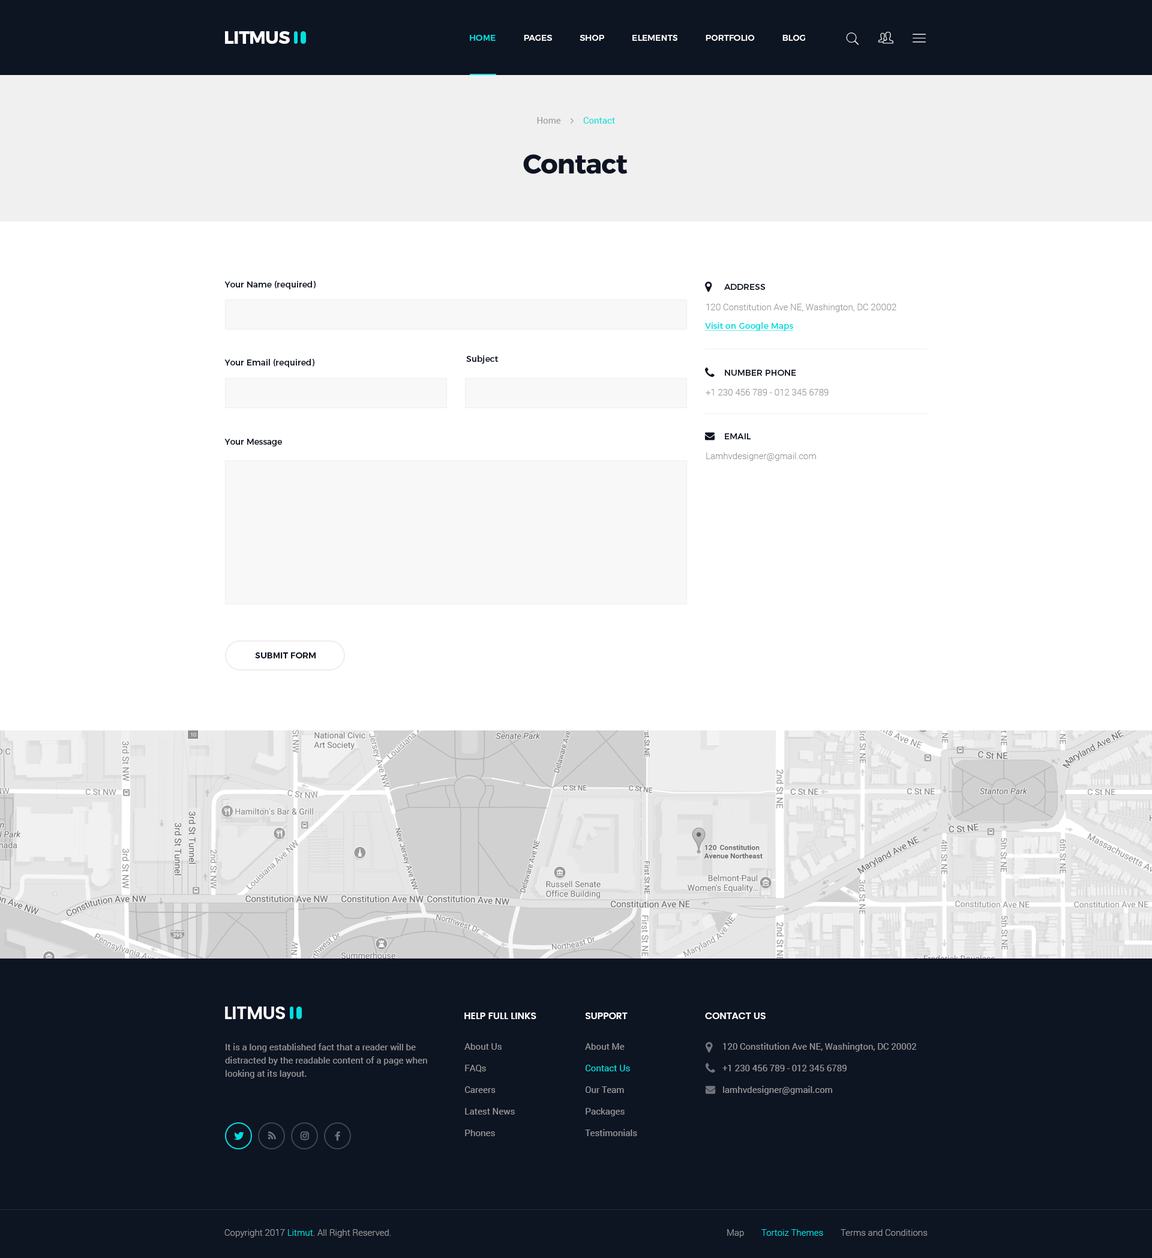
<style>
.page{position:relative;width:1152px;height:1258px;background:#ffffff}
.page>*{position:absolute;margin:0}
.t1{font:18px "Montserrat-Bold";letter-spacing:-0.025em;color:#ffffff;text-transform:uppercase}
.t2{font:8.4px "Montserrat-Medium";color:#ffffff;text-transform:uppercase}
.t3{font:8.4px "Montserrat-Medium";color:#03dedf;text-transform:uppercase}
.t4{font:9px "Roboto-Regular";color:#03dedf}
.t5{font:9px "Roboto-Regular";color:#999999}
.t6{font:27px "Montserrat-Bold";letter-spacing:-0.025em;color:#0d1422}
.t7{font:8.4px "Montserrat-Regular";color:#0d1422}
.t8{font:8.4px "Montserrat-Regular";color:#0d1422;text-transform:uppercase}
.t9{font:9px "Roboto-Light";color:#999999}
.t10{font:8.4px "Montserrat-Regular";color:#03dedf;text-decoration:underline}
.t11{font:8.4px "Montserrat-SemiBold";color:#0d1422;text-transform:uppercase}
.t12{font:18px "Poppins-SemiBold";letter-spacing:-0.025em;color:#ffffff;text-transform:uppercase}
.t13{font:9.6px "Poppins-SemiBold";letter-spacing:-0.025em;color:#ffffff;text-transform:uppercase}
.t14{font:9px/13.2px "Roboto-Regular";color:#999999}
.t15{font:9px/21.6px "Roboto-Regular";color:#999999}
.t16{font:9px/21.6px "Roboto-Regular";color:#03dedf}
.t17{font:9px "Roboto-Light";color:#03dedf}
</style>
<div class="page">
<p class="t1" style="left:225px;top:31px;width:65px;height:13px">Litmus</p>
<p class="t2" style="left:470px;top:35px;width:335px;height:6px"><span class="t3">HOME</span>           PAGES           SHOP           ELEMENTS           PORTFOLIO           BLOG</p>
<p class="t4" style="left:537px;top:117px;width:78px;height:7px"><span class="t5">Home          </span>Contact</p>
<p class="t6" style="left:523px;top:154px;width:105px;height:20px">Contact</p>
<p class="t7" style="left:224px;top:281px;width:92px;height:8px">Your Name (required)</p>
<p class="t8" style="left:724px;top:284px;width:42px;height:6px">Address</p>
<p class="t9" style="left:706px;top:304px;width:190px;height:8px">120 Constitution Ave NE, Washington, DC 20002</p>
<p class="t10" style="left:705px;top:322px;width:89px;height:9px">Visit on Google Maps</p>
<p class="t7" style="left:224px;top:359px;width:90px;height:8px">Your Email (required)</p>
<p class="t7" style="left:466px;top:355px;width:33px;height:9px">Subject</p>
<p class="t8" style="left:725px;top:370px;width:71px;height:6px">Number Phone</p>
<p class="t9" style="left:706px;top:389px;width:123px;height:6px">+1 230 456 789 - 012 345 6789</p>
<p class="t8" style="left:725px;top:433px;width:26px;height:6px">Email</p>
<p class="t7" style="left:224px;top:439px;width:58px;height:7px">Your Message</p>
<p class="t9" style="left:706px;top:452px;width:110px;height:9px">Lamhvdesigner@gmail.com</p>
<p class="t11" style="left:255px;top:652px;width:61px;height:6px">Submit Form</p>
<p class="t12" style="left:225px;top:1006px;width:60px;height:13px">Litmus</p>
<p class="t13" style="left:464px;top:1012px;width:72px;height:7px">Help full links</p>
<p class="t13" style="left:586px;top:1012px;width:42px;height:7px">Support</p>
<p class="t13" style="left:705px;top:1012px;width:61px;height:7px">Contact Us</p>
<p class="t14" style="left:225px;top:1043px;width:202px;height:35px">It is a long established fact that a reader will be distracted by the readable content of a page when looking at its layout.</p>
<p class="t15" style="left:464px;top:1043px;width:51px;height:93px">About Us<br>FAQs<br>Careers<br>Latest News<br>Phones</p>
<p class="t15" style="left:585px;top:1043px;width:52px;height:93px">About Me<br><span class="t16">Contact Us<br></span>Our Team<br>Packages<br>Testimonials</p>
<p class="t15" style="left:722px;top:1042px;width:195px;height:52px">120 Constitution Ave NE, Washington, DC 20002<br>+1 230 456 789 - 012 345 6789<br>lamhvdesigner@gmail.com</p>
<p class="t9" style="left:224px;top:1229px;width:167px;height:8px">Copyright 2017 <span class="t17">Litmut</span>. All Right Reserved.</p>
<p class="t9" style="left:727px;top:1229px;width:17px;height:8px">Map</p>
<p class="t17" style="left:761px;top:1229px;width:62px;height:6px">Tortoiz Themes</p>
<p class="t9" style="left:841px;top:1229px;width:87px;height:6px">Terms and Conditions</p>
</div>
